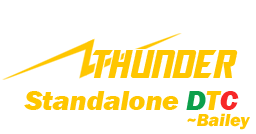
<style>
.page{position:relative;width:256px;height:134px;background:#ffffff}
.page>*{position:absolute;margin:0}
.t1{font:28.3px "FranklinGothic-HeavyItalic";color:#ffc600}
.t2{font:28.3px "FranklinGothic-HeavyItalic";color:#0c9f4b}
.t3{font:28.3px "FranklinGothic-HeavyItalic";color:#f72727}
.t4{font:18px "FranklinGothic-HeavyItalic";color:#ffc600}
</style>
<div class="page">
<p class="t1" style="left:24px;top:91px;width:215px;height:19px">Standalone <span class="t2">D</span>T<span class="t3">C</span></p>
<p class="t4" style="left:187px;top:113px;width:63px;height:17px">~Bailey</p>
</div>
